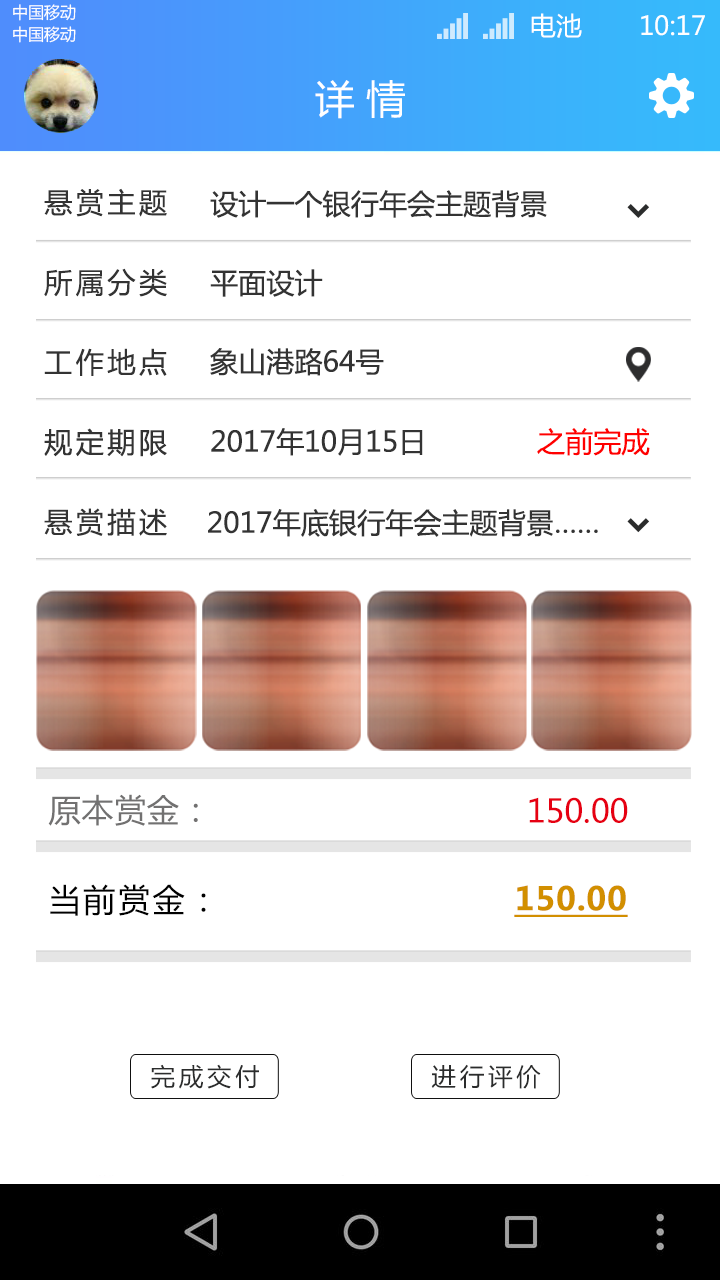
<style>
.page{position:relative;width:720px;height:1280px;background:#ffffff}
.page>*{position:absolute;margin:0}
.t1{font:16.2px "MicrosoftYaHei";color:#ffffff;text-transform:uppercase}
.t2{font:26.1px "MicrosoftYaHei";color:#ffffff;text-transform:uppercase}
.t3{font:39.5px "MicrosoftYaHei";color:#ffffff;text-transform:uppercase}
.t4{font:28.1px/79.9px "MicrosoftYaHei";color:#333333}
.t5{font:28.1px "MicrosoftYaHei";color:#333333}
.t6{font:28.1px "MicrosoftYaHei";color:#ff0000}
.t7{font:31.9px "MicrosoftYaHei";color:#727171}
.t8{font:31.9px "MicrosoftYaHei";color:#e60012}
.t9{font:31.9px "MicrosoftYaHei";letter-spacing:0.08em;color:#000000}
.t10{font:31.9px "MicrosoftYaHei-Bold";color:#d28f00;text-decoration:underline}
.t11{font:24.5px "MicrosoftYaHei";letter-spacing:0.15em;color:#2b2c2c}
</style>
<div class="page">
<p class="t1" style="left:13px;top:4px;width:63px;height:17px">中国移动</p>
<p class="t2" style="left:531px;top:13px;width:51px;height:25px">电池</p>
<p class="t2" style="left:641px;top:15px;width:64px;height:21px">10:17</p>
<p class="t1" style="left:13px;top:26px;width:63px;height:17px">中国移动</p>
<p class="t3" style="left:315px;top:80px;width:90px;height:39px">详 情</p>
<p class="t4" style="left:44px;top:188px;width:123px;height:348px;text-align:justify">悬赏主题<br>所属分类<br>工作地点<br>规定期限<br>悬赏描述</p>
<p class="t5" style="left:210px;top:190px;width:337px;height:28px">设计一个银行年会主题背景</p>
<p class="t5" style="left:210px;top:269px;width:113px;height:28px">平面设计</p>
<p class="t5" style="left:210px;top:348px;width:174px;height:28px">象山港路64号</p>
<p class="t5" style="left:211px;top:428px;width:212px;height:28px">2017年10月15日</p>
<p class="t6" style="left:537px;top:428px;width:113px;height:28px">之前完成</p>
<p class="t5" style="left:208px;top:509px;width:390px;height:28px">2017年底银行年会主题背景……</p>
<p class="t7" style="left:48px;top:794px;width:150px;height:32px">原本赏金：</p>
<p class="t8" style="left:529px;top:797px;width:99px;height:26px">150.00</p>
<p class="t9" style="left:50px;top:884px;width:156px;height:32px">当前赏金：</p>
<p class="t10" style="left:514px;top:885px;width:114px;height:32px">150.00</p>
<p class="t11" style="left:151px;top:1064px;width:108px;height:25px">完成交付</p>
<p class="t11" style="left:431px;top:1064px;width:110px;height:25px">进行评价</p>
</div>
